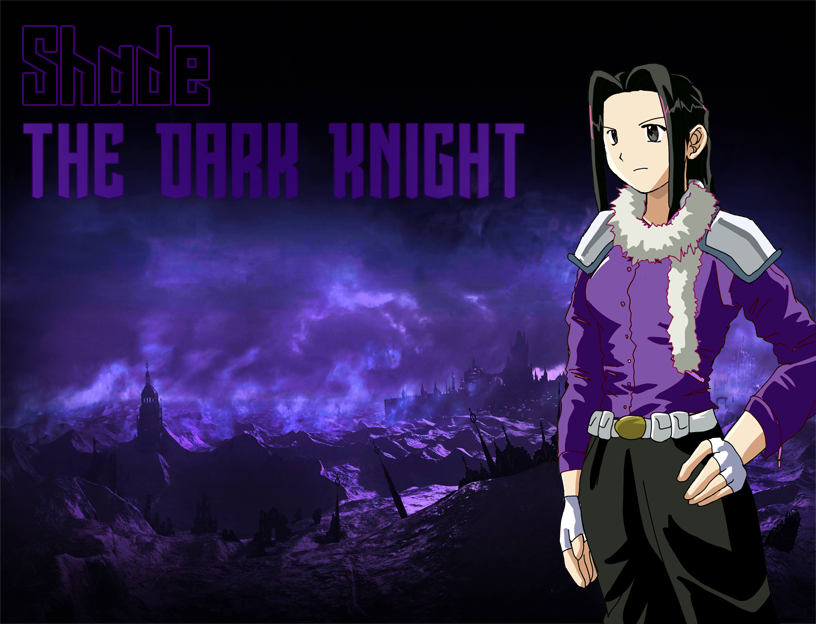
<style>
.page{position:relative;width:816px;height:624px}
.page>*{position:absolute;margin:0}
.t1{font:99px "LongShot";color:#000001}
.t2{font:113px "ViceroyofDeacons";color:#390a77}
</style>
<div class="page">
<p class="t1" style="left:24px;top:27px;width:184px;height:77px">Shade</p>
<p class="t2" style="left:23px;top:123px;width:501px;height:76px">The Dark Knight</p>
</div>
